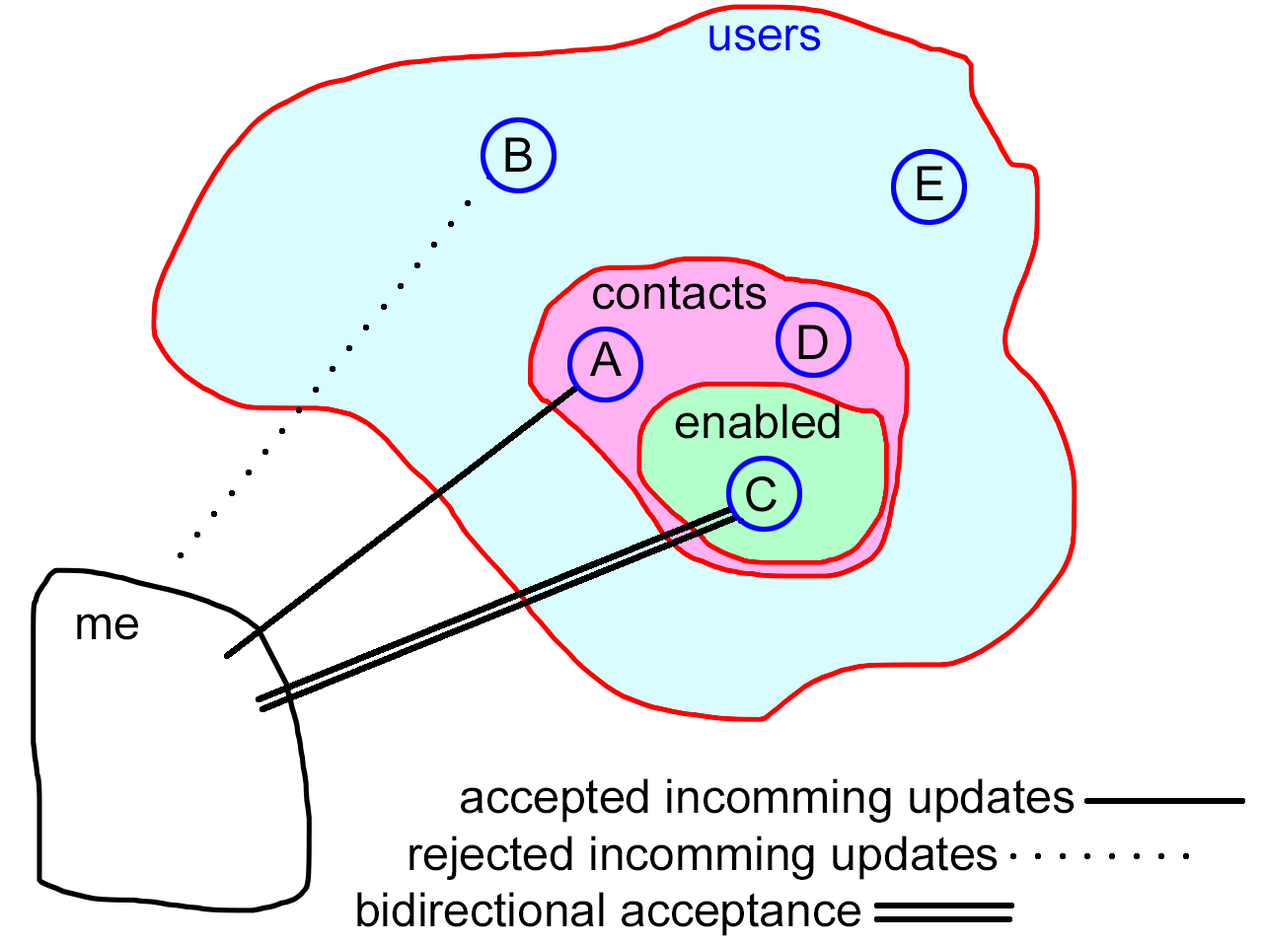
<style>
.page{position:relative;width:1263px;height:944px;background:#ffffff}
.page>*{position:absolute;margin:0}
.t1{font:47.4px "ArialMT";color:#0600ff}
.t2{font:47.4px "ArialMT";color:#000000}
</style>
<div class="page">
<p class="t1" style="left:709px;top:25px;width:112px;height:26px">users</p>
<p class="t2" style="left:593px;top:275px;width:174px;height:35px">contacts</p>
<p class="t2" style="left:675px;top:404px;width:165px;height:35px">enabled</p>
<p class="t2" style="left:77px;top:614px;width:61px;height:26px">me</p>
<p class="t2" style="left:357px;top:778px;width:717px;height:158px">accepted incomming updates<br>    rejected incomming updates<br>bidirectional acceptance</p>
</div>
